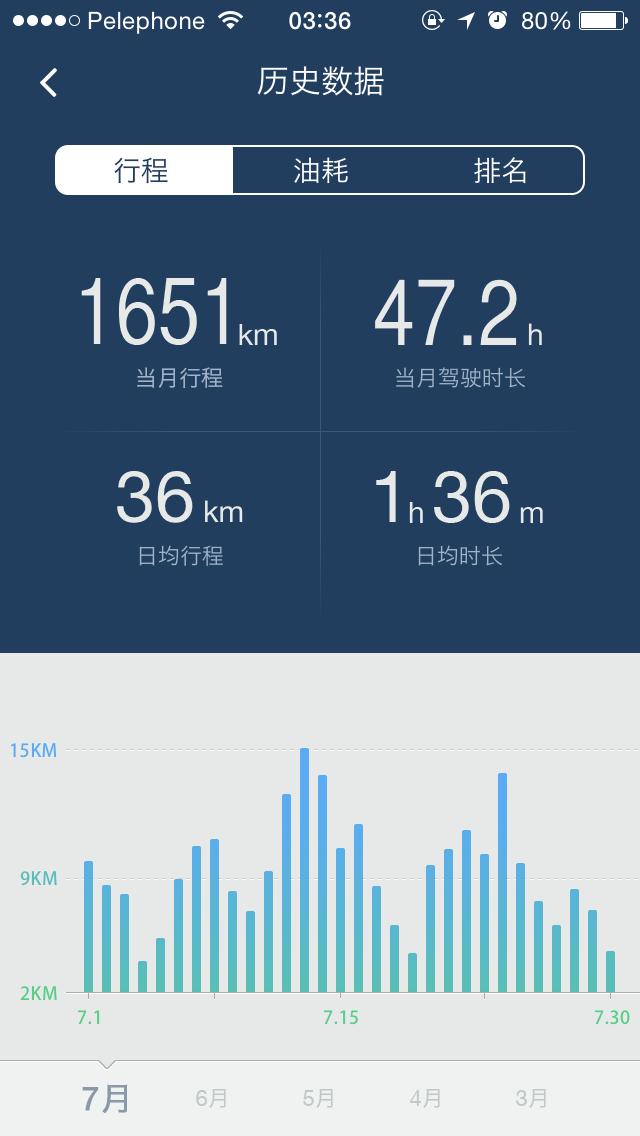
<style>
.page{position:relative;width:640px;height:1136px;background:#223e5e}
.page>*{position:absolute;margin:0}
.t1{font:24px "HelveticaNeue";letter-spacing:0.02em;color:#ffffff}
.t2{font:24px "HelveticaNeue-Medium";letter-spacing:0.03em;color:#ffffff}
.t3{font:32px "HiraginoSansGB-W3";color:#ffffff}
.t4{font:28px "HiraginoSansGB-W3";color:#223e5e}
.t5{font:28px "HiraginoSansGB-W3";color:#ffffff}
.t6{font:92.1px "HelveticaCYPlain";color:#e7e9e9}
.t7{font:92px "HelveticaCYPlain";color:#e7e9e9}
.t8{font:30px "HelveticaNeue";color:#e7e9e9}
.t9{font:22px "HiraginoSansGB-W3";color:#a0b3c8}
.t10{font:72px "HelveticaNeue";color:#e7e9e9}
.t11{font:18px "AdobeHeitiStd-Regular";letter-spacing:0.025em;color:#5aabf3}
.t12{font:18px "AdobeHeitiStd-Regular";letter-spacing:0.025em;color:#59bdbb}
.t13{font:18px "AdobeHeitiStd-Regular";letter-spacing:0.025em;color:#58ce88}
.t14{font:32px "HelveticaNeue";color:#8a98a7;font-weight:bold}
.t15{font:32px "HiraginoSansGB-W3";color:#8a98a7;font-weight:bold}
.t16{font:22px "HelveticaNeue";color:#c0c8c8}
.t17{font:22px "HiraginoSansGB-W3";color:#c0c8c8}
</style>
<div class="page">
<p class="t1" style="left:88px;top:11px;width:117px;height:23px">Pelephone</p>
<p class="t2" style="left:289px;top:11px;width:62px;height:19px">03 36</p>
<p class="t1" style="left:522px;top:11px;width:49px;height:19px">80%</p>
<p class="t3" style="left:257px;top:66px;width:127px;height:30px">历史数据</p>
<p class="t4" style="left:114px;top:157px;width:54px;height:27px">行程</p>
<p class="t5" style="left:294px;top:157px;width:54px;height:27px">油耗</p>
<p class="t5" style="left:474px;top:157px;width:52px;height:27px">排名</p>
<p class="t6" style="left:81px;top:278px;width:146px;height:67px">1651</p>
<p class="t7" style="left:375px;top:279px;width:142px;height:66px">47.2</p>
<p class="t8" style="left:239px;top:324px;width:38px;height:21px">km</p>
<p class="t8" style="left:528px;top:323px;width:14px;height:22px">h</p>
<p class="t9" style="left:137px;top:367px;width:86px;height:21px">当月行程</p>
<p class="t9" style="left:396px;top:367px;width:129px;height:21px">当月驾驶时长</p>
<p class="t10" style="left:117px;top:471px;width:76px;height:52px">36</p>
<p class="t10" style="left:376px;top:471px;width:20px;height:51px">1</p>
<p class="t10" style="left:434px;top:471px;width:76px;height:52px">36</p>
<p class="t8" style="left:205px;top:500px;width:38px;height:22px">km</p>
<p class="t8" style="left:409px;top:502px;width:14px;height:21px">h</p>
<p class="t8" style="left:520px;top:507px;width:23px;height:16px">m</p>
<p class="t9" style="left:139px;top:545px;width:84px;height:21px">日均行程</p>
<p class="t9" style="left:418px;top:545px;width:84px;height:21px">日均时长</p>
<p class="t11" style="left:10px;top:743px;width:47px;height:15px">15KM</p>
<p class="t12" style="left:20px;top:871px;width:37px;height:15px">9KM</p>
<p class="t13" style="left:20px;top:986px;width:37px;height:14px">2KM</p>
<p class="t13" style="left:78px;top:1010px;width:22px;height:15px">7.1</p>
<p class="t13" style="left:324px;top:1010px;width:34px;height:15px">7.15</p>
<p class="t13" style="left:595px;top:1010px;width:35px;height:15px">7.30</p>
<p class="t14" style="left:82px;top:1084px;width:46px;height:29px">7<span class="t15">月</span></p>
<p class="t16" style="left:196px;top:1088px;width:30px;height:20px">6<span class="t17">月</span></p>
<p class="t16" style="left:303px;top:1088px;width:30px;height:20px">5<span class="t17">月</span></p>
<p class="t16" style="left:410px;top:1088px;width:30px;height:20px">4<span class="t17">月</span></p>
<p class="t16" style="left:516px;top:1088px;width:30px;height:20px">3<span class="t17">月</span></p>
</div>
